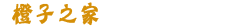
<style>
.page{position:relative;width:240px;height:28px;background:#ffffff}
.page>*{position:absolute;margin:0}
.t1{font:24px "HYn3gj";color:#d58f08;font-weight:bold;scale:0.91 1}
</style>
<div class="page">
<p class="t1" style="left:12px;top:2px;width:87px;height:24px">橙子之家</p>
</div>
